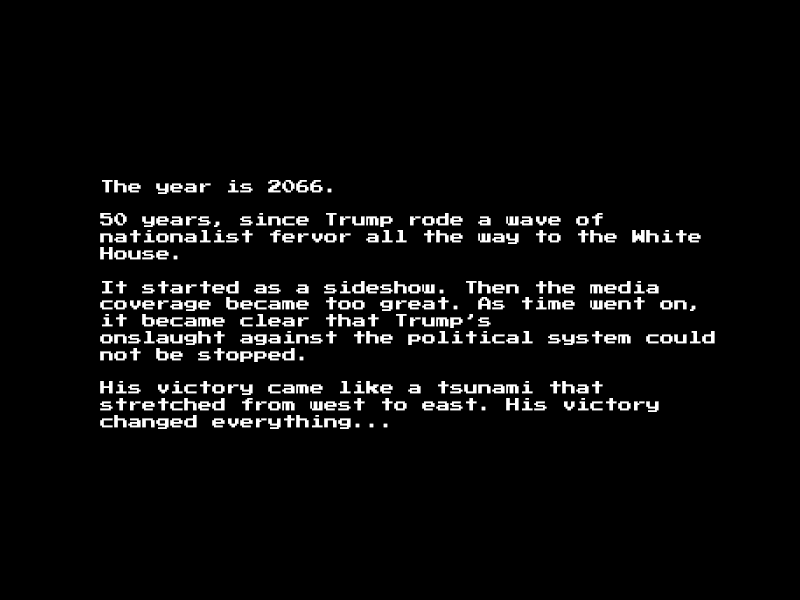
<style>
.page{position:relative;width:800px;height:600px;background:#000000}
.page>*{position:absolute;margin:0}
.t1{font:14px "PressStart2P";color:#ffffff}
</style>
<div class="page">
<p class="t1" style="left:100px;top:180px;width:615px;height:249px">The year is 2066.<br><br>50 years, since Trump rode a wave of <br>nationalist fervor all the way to the White House.<br><br>It started as a sideshow. Then the media coverage became too great. As time went on, it became clear that Trump’s <br>onslaught against the political system could not be stopped.<br><br>His victory came like a tsunami that stretched from west to east. His victory changed everything...</p>
</div>
